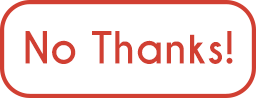
<style>
.page{position:relative;width:256px;height:98px;background:#ffffff}
.page>*{position:absolute;margin:0}
.t1{font:41.7px "CaviarDreams-Bold";color:#d13f32}
</style>
<div class="page">
<p class="t1" style="left:25px;top:31px;width:208px;height:33px">No Thanks!</p>
</div>
